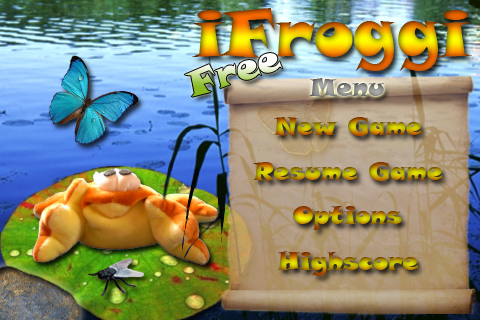
<style>
.page{position:relative;width:480px;height:320px}
.page>*{position:absolute;margin:0}
.t1{font:66px "SnapITC-Regular"}
.t2{font:36px "SnapITC-Regular"}
.t3{font:25px "SnapITC-Regular"}
</style>
<div class="page">
<p class="t1" style="left:192px;top:8px;width:280px;height:63px">iFroggi</p>
<p class="t2" style="left:184px;top:53px;width:99px;height:44px;rotate:-18deg">Free</p>
<p class="t3" style="left:309px;top:78px;width:75px;height:19px">Menu</p>
<p class="t3" style="left:274px;top:117px;width:148px;height:19px">New Game</p>
<p class="t3" style="left:253px;top:162px;width:190px;height:20px">Resume Game</p>
<p class="t3" style="left:293px;top:206px;width:109px;height:24px">Options</p>
<p class="t3" style="left:277px;top:251px;width:142px;height:25px">Highscore</p>
</div>
